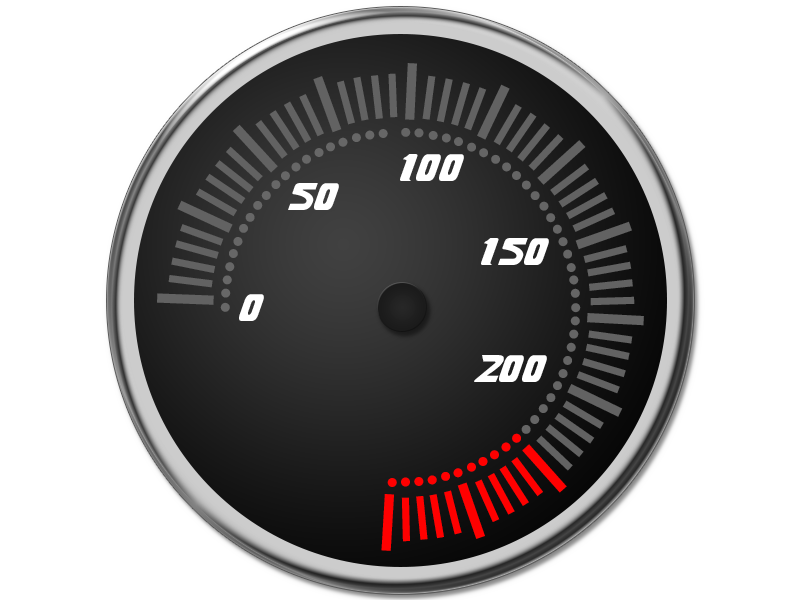
<style>
.page{position:relative;width:800px;height:600px;background:#ffffff}
.page>*{position:absolute;margin:0}
.t1{font:37.7px "-Xenogears";color:#ffffff}
</style>
<div class="page">
<p class="t1" style="left:400px;top:154px;width:64px;height:27px">100</p>
<p class="t1" style="left:288px;top:183px;width:51px;height:27px">50</p>
<p class="t1" style="left:481px;top:238px;width:68px;height:27px">150</p>
<p class="t1" style="left:239px;top:294px;width:25px;height:27px">0</p>
<p class="t1" style="left:474px;top:355px;width:73px;height:27px">200</p>
</div>
